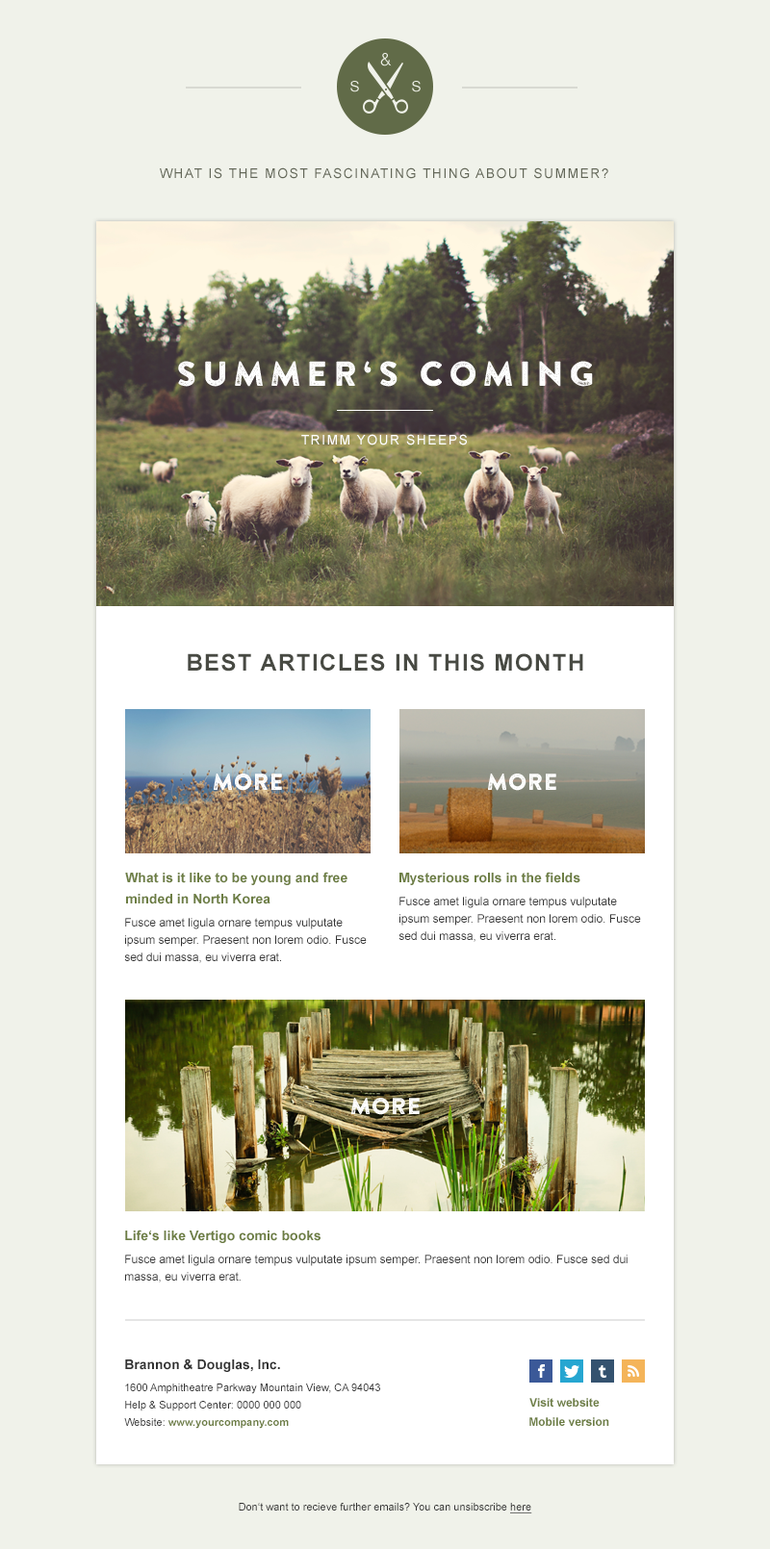
<style>
.page{position:relative;width:770px;height:1549px;background:#f0f2ea}
.page>*{position:absolute;margin:0}
.t1{font:17.3px "HelveticaNeue-Light";letter-spacing:0.06em;color:#f0f2ea;text-transform:uppercase}
.t2{font:20.2px "HelveticaNeue-Light";letter-spacing:0.06em;color:#f0f2ea}
.t3{font:13.5px "ArialMT";letter-spacing:0.1em;color:#636758;text-transform:uppercase}
.t4{font:34.6px "BrandonPrinted-One";letter-spacing:0.14em;color:#ffffff;text-transform:uppercase}
.t5{font:13.5px "ArialMT";letter-spacing:0.1em;color:#ffffff;text-transform:uppercase}
.t6{font:23.1px "Arial-BoldMT";letter-spacing:0.06em;color:#484a43;text-transform:uppercase}
.t7{font:23.1px "BrandonPrinted-One";color:#ffffff;text-transform:uppercase}
.t8{font:13.5px/21.2px "Arial-BoldMT";color:#6d7e44}
.t9{font:13.5px "Arial-BoldMT";color:#6d7e44}
.t10{font:11.5px/17.3px "ArialMT";color:#333333}
.t11{font:13.5px "Arial-BoldMT";color:#333333}
.t12{font:10.6px/17.3px "ArialMT";color:#333333}
.t13{font:10.6px/17.3px "Arial-BoldMT";color:#6d7e44}
.t14{font:11.5px "Arial-BoldMT";color:#6d7e44}
.t15{font:10.6px "ArialMT";color:#333333}
.t16{font:10.6px "ArialMT";color:#333333;text-decoration:underline}
</style>
<div class="page">
<p class="t1" style="left:380px;top:53px;width:12px;height:13px">&amp;</p>
<p class="t2" style="left:350px;top:81px;width:9px;height:11px">s</p>
<p class="t2" style="left:412px;top:81px;width:8px;height:11px">s</p>
<p class="t3" style="left:160px;top:167px;width:448px;height:12px">what is the most fascinating thing about summer?</p>
<p class="t4" style="left:178px;top:361px;width:415px;height:26px">summer‘s coming</p>
<p class="t5" style="left:301px;top:434px;width:166px;height:11px">trimm your sheeps</p>
<p class="t6" style="left:188px;top:653px;width:395px;height:19px">Best articles in this month</p>
<p class="t7" style="left:214px;top:774px;width:68px;height:17px">more</p>
<p class="t7" style="left:488px;top:774px;width:68px;height:17px">more</p>
<p class="t8" style="left:125px;top:872px;width:222px;height:32px">What is it like to be young and free minded in North Korea</p>
<p class="t9" style="left:399px;top:872px;width:181px;height:13px">Mysterious rolls in the fields</p>
<p class="t10" style="left:398px;top:897px;width:243px;height:45px">Fusce amet ligula ornare tempus vulputate ipsum semper. Praesent non lorem odio. Fusce sed dui massa, eu viverra erat.</p>
<p class="t10" style="left:124px;top:918px;width:243px;height:45px">Fusce amet ligula ornare tempus vulputate ipsum semper. Praesent non lorem odio. Fusce sed dui massa, eu viverra erat.</p>
<p class="t7" style="left:351px;top:1098px;width:69px;height:17px">more</p>
<p class="t9" style="left:125px;top:1230px;width:195px;height:13px">Life‘s like Vertigo comic books</p>
<p class="t10" style="left:125px;top:1255px;width:502px;height:28px">Fusce amet ligula ornare tempus vulputate ipsum semper. Praesent non lorem odio. Fusce sed dui massa, eu viverra erat.</p>
<p class="t11" style="left:125px;top:1359px;width:155px;height:13px">Brannon &amp; Douglas, Inc.</p>
<p class="t12" style="left:124px;top:1384px;width:256px;height:45px">1600 Amphitheatre Parkway Mountain View, CA 94043 <br>Help &amp; Support Center: 0000 000 000 <br>Website: <span class="t13">www.yourcompany.com</span></p>
<p class="t14" style="left:529px;top:1398px;width:70px;height:9px">Visit website</p>
<p class="t14" style="left:529px;top:1417px;width:80px;height:9px">Mobile version</p>
<p class="t15" style="left:239px;top:1503px;width:293px;height:11px">Don‘t want to recieve further emails? You can unsibscribe <span class="t16">here</span></p>
</div>
